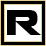
<style>
.page{position:relative;width:46px;height:46px;background:#000000}
.page>*{position:absolute;margin:0}
.t1{font:36px "Coalition";color:#000000}
</style>
<div class="page">
<p class="t1" style="left:7px;top:10px;width:34px;height:25px">r</p>
</div>
